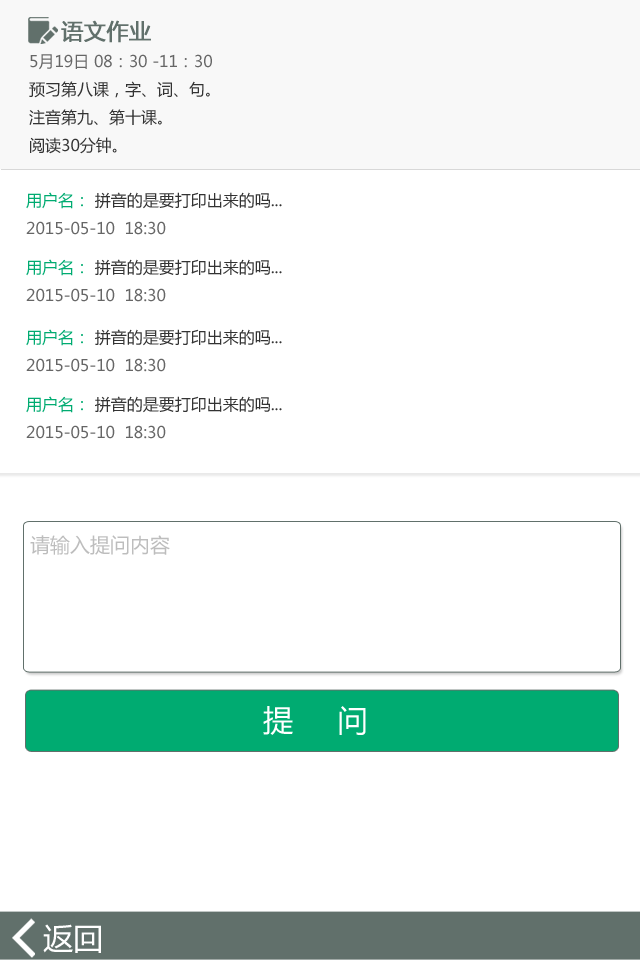
<style>
.page{position:relative;width:640px;height:960px;background:#ffffff}
.page>*{position:absolute;margin:0}
.t1{font:22px "MicrosoftYaHei";color:#666666;font-weight:bold}
.t2{font:16px "MicrosoftYaHei";color:#333333}
.t3{font:16px "MicrosoftYaHei";color:#666666}
.t4{font:16px "MicrosoftYaHei";color:#00ab71}
.t5{font:20px "MicrosoftYaHei";color:#bdbdbd}
.t6{font:30px "MicrosoftYaHei";color:#ffffff}
</style>
<div class="page">
<p class="t1" style="left:61px;top:20px;width:90px;height:23px">语文作业</p>
<p class="t2" style="left:29px;top:54px;width:183px;height:100px"><span class="t3">5月19日 08：30 -11：30<br></span>预习第八课，字、词、句。<br>注音第九、第十课。<br>阅读30分钟。</p>
<p class="t3" style="left:26px;top:192px;width:256px;height:43px"><span class="t4">用户名： </span><span class="t2">拼音的是要打印出来的吗...<br></span>2015-05-10  18:30</p>
<p class="t3" style="left:26px;top:259px;width:256px;height:43px"><span class="t4">用户名： </span><span class="t2">拼音的是要打印出来的吗...<br></span>2015-05-10  18:30</p>
<p class="t3" style="left:26px;top:329px;width:256px;height:43px"><span class="t4">用户名： </span><span class="t2">拼音的是要打印出来的吗...<br></span>2015-05-10  18:30</p>
<p class="t3" style="left:26px;top:396px;width:256px;height:43px"><span class="t4">用户名： </span><span class="t2">拼音的是要打印出来的吗...<br></span>2015-05-10  18:30</p>
<p class="t5" style="left:30px;top:535px;width:140px;height:20px">请输入提问内容</p>
<p class="t6" style="left:263px;top:706px;width:103px;height:29px">提     问</p>
<p class="t6" style="left:43px;top:924px;width:58px;height:29px">返回</p>
</div>
